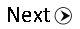
<style>
.page{position:relative;width:80px;height:29px;background:#ffffff}
.page>*{position:absolute;margin:0}
.t1{font:23.6px "Calibri";color:#050505}
</style>
<div class="page">
<p class="t1" style="left:8px;top:7px;width:42px;height:15px">Next</p>
</div>
